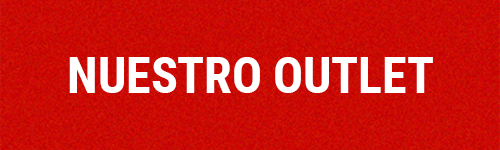
<style>
.page{position:relative;width:500px;height:150px}
.page>*{position:absolute;margin:0}
.t1{font:49.6px "RobotoCondensed-Bold";color:#ffffff}
</style>
<div class="page">
<p class="t1" style="left:69px;top:57px;width:364px;height:36px">NUESTRO OUTLET</p>
</div>
